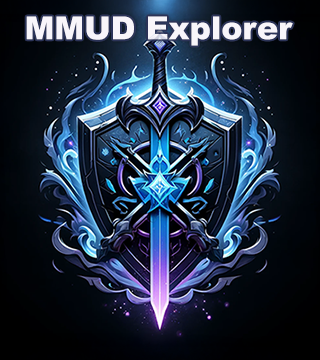
<style>
.page{position:relative;width:320px;height:360px}
.page>*{position:absolute;margin:0}
.t1{font:31.6px "Arial-Black";color:#f8f5fa}
</style>
<div class="page">
<p class="t1" style="left:26px;top:16px;width:267px;height:30px">MMUD Explorer</p>
</div>
